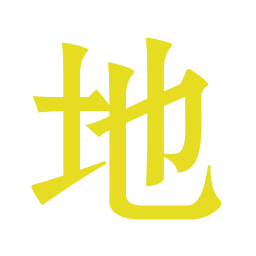
<style>
.page{position:relative;width:256px;height:256px;background:#ffffff}
.page>*{position:absolute;margin:0}
.t1{font:198px "Reeji-CloudSongHei-GB-Regular";color:#e6dd22}
</style>
<div class="page">
<p class="t1" style="left:30px;top:37px;width:192px;height:183px">地</p>
</div>
